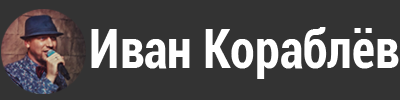
<style>
.page{position:relative;width:400px;height:100px;background:#333333}
.page>*{position:absolute;margin:0}
.t1{font:53.6px "Roboto-BoldCondensed";color:#ffffff;scale:0.93 1}
</style>
<div class="page">
<p class="t1" style="left:91px;top:27px;width:308px;height:52px">Иван Кораблёв</p>
</div>
